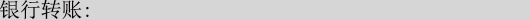
<style>
.page{position:relative;width:530px;height:20px;background:#d6d6d6}
.page>*{position:absolute;margin:0}
.t1{font:20.8px "SimSun";color:#090505}
</style>
<div class="page">
<p class="t1" style="left:0px;top:0px;width:89px;height:20px">银行转账:</p>
</div>
